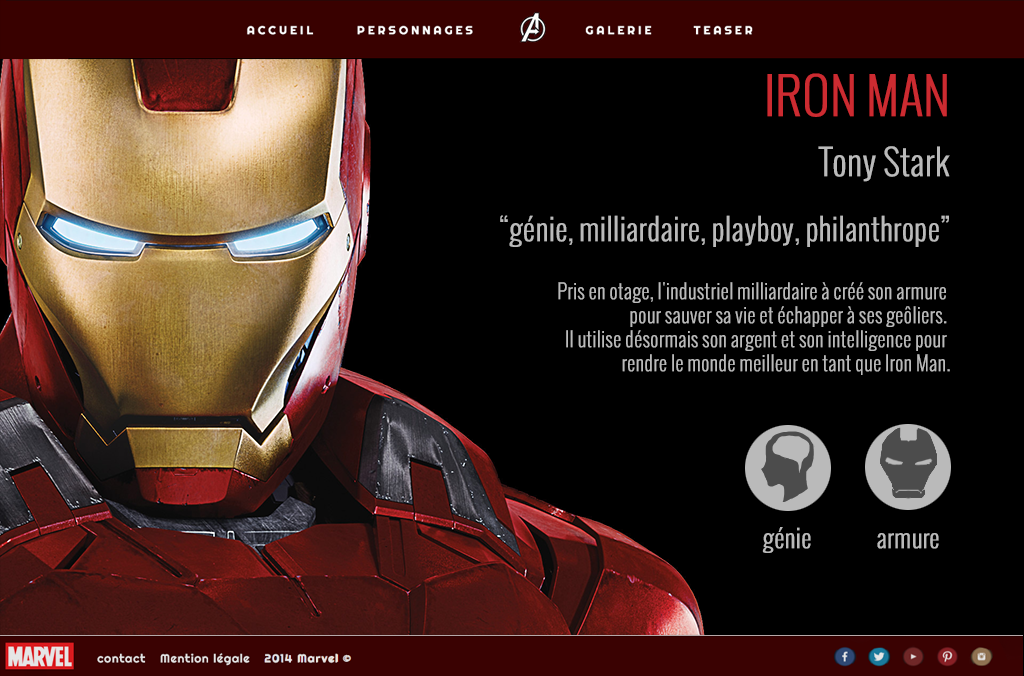
<style>
.page{position:relative;width:1024px;height:676px;background:#000000}
.page>*{position:absolute;margin:0}
.t1{font:50px "Oswald-Light";color:#cc2b31;text-transform:uppercase;font-weight:bold}
.t2{font:35px "Oswald-Light";color:#bababa;font-weight:bold}
.t3{font:30px "Oswald-Light";color:#bababa;font-weight:bold}
.t4{font:20px "Oswald-Light";color:#bababa;font-weight:bold}
.t5{font:25px "Oswald-Light";color:#bababa;font-weight:bold}
</style>
<div class="page">
<p class="t1" style="left:767px;top:73px;width:180px;height:44px">IRON MAN</p>
<p class="t2" style="left:818px;top:146px;width:132px;height:36px">Tony Stark</p>
<p class="t3" style="left:500px;top:215px;width:449px;height:32px">“génie, milliardaire, playboy, philanthrope”</p>
<p class="t4" style="left:558px;top:282px;width:392px;height:93px;text-align:right">Pris en otage, l'industriel milliardaire à créé son armure <br>pour sauver sa vie et échapper à ses geôliers. <br>Il utilise désormais son argent et son intelligence pour <br>rendre le monde meilleur en tant que Iron Man.</p>
<p class="t5" style="left:762px;top:527px;width:49px;height:26px">génie</p>
<p class="t5" style="left:877px;top:533px;width:62px;height:16px">armure</p>
</div>
